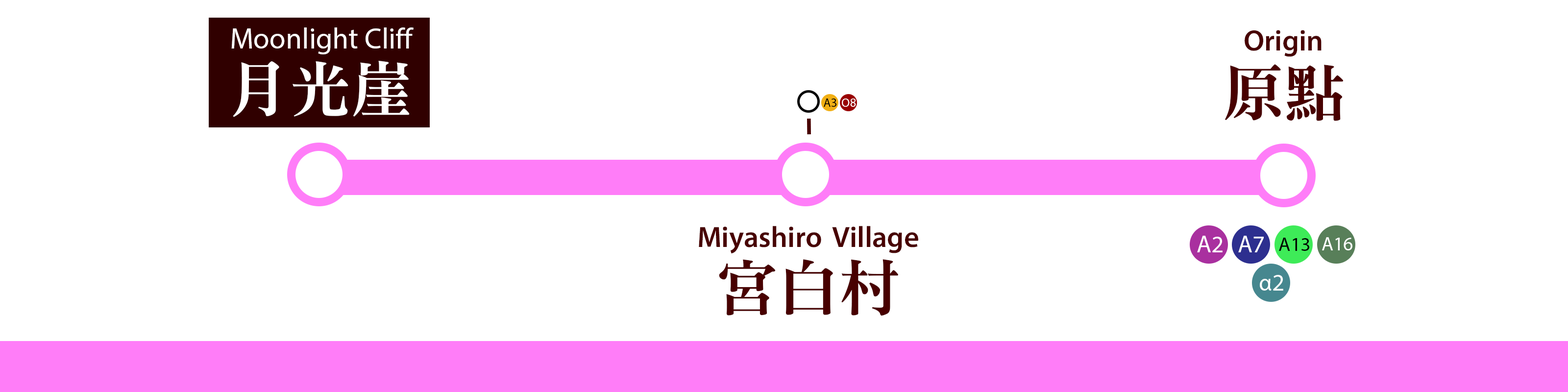
<style>
.page{position:relative;width:1568px;height:392px;background:#ffffff}
.page>*{position:absolute;margin:0}
.t1{font:29.4px "MyriadPro-Regular";color:#ffffff}
.t2{font:29.4px "MTR-Sung";color:#480000}
.t3{font:61.2px "MTR-Sung";color:#ffffff}
.t4{font:61.2px "MTR-Sung";color:#480000}
.t5{font:12.3px "MyriadPro-Regular";color:#000000}
.t6{font:12.3px "MyriadPro-Regular";color:#ffffff}
.t7{font:24.1px "MyriadPro-Regular";color:#ffffff}
.t8{font:19.6px "MyriadPro-Regular";color:#000000}
.t9{font:19.4px "MyriadPro-Regular";color:#ffffff}
</style>
<div class="page">
<p class="t1" style="left:231px;top:27px;width:183px;height:27px">Moonlight Cliff</p>
<p class="t2" style="left:1245px;top:30px;width:77px;height:27px">Origin</p>
<p class="t3" style="left:233px;top:61px;width:177px;height:56px">月光崖</p>
<p class="t4" style="left:1225px;top:64px;width:119px;height:57px">原點</p>
<p class="t5" style="left:824px;top:98px;width:12px;height:9px">A3</p>
<p class="t6" style="left:842px;top:98px;width:14px;height:9px">O8</p>
<p class="t2" style="left:699px;top:226px;width:219px;height:28px">Miyashiro Village</p>
<p class="t7" style="left:1197px;top:236px;width:26px;height:16px">A2</p>
<p class="t7" style="left:1238px;top:236px;width:26px;height:16px">A7</p>
<p class="t8" style="left:1279px;top:238px;width:30px;height:13px">A13</p>
<p class="t9" style="left:1322px;top:237px;width:30px;height:13px">A16</p>
<p class="t4" style="left:719px;top:259px;width:179px;height:57px">宮白村</p>
<p class="t7" style="left:1260px;top:275px;width:23px;height:16px">α2</p>
</div>
